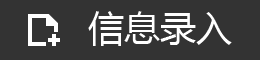
<style>
.page{position:relative;width:260px;height:60px;background:#333333}
.page>*{position:absolute;margin:0}
.t1{font:36px "MicrosoftYaHei";color:#ffffff}
</style>
<div class="page">
<p class="t1" style="left:88px;top:11px;width:144px;height:35px">信息录入</p>
</div>
